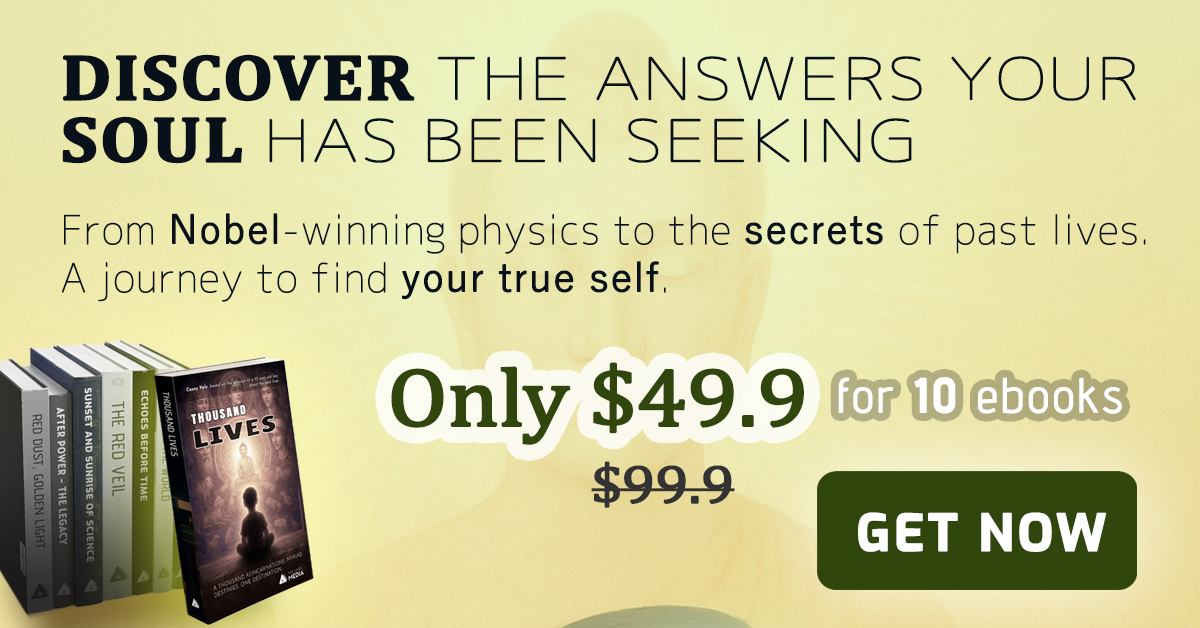
<style>
.page{position:relative;width:1200px;height:628px}
.page>*{position:absolute;margin:0}
.t1{font:57.6px "Chogokuboso-Gothic";letter-spacing:0.005em;color:#08101a;font-weight:bold;scale:1.25 1}
.t2{font:64.8px "Cambria-Bold";letter-spacing:0.005em;color:#08101a;font-weight:bold;scale:1.11 1}
.t3{font:39.6px/48px "Chogokuboso-Gothic";letter-spacing:0.005em;color:#08101a;font-weight:bold}
.t4{font:39.6px/48px "YuGothic-Regular";letter-spacing:0.005em;color:#08101a;font-weight:bold}
.t5{font:82.8px "Cambria";letter-spacing:-0.025em;color:#31460c;font-weight:bold;scale:1.11 1}
.t6{font:54px "Cambria";letter-spacing:-0.025em;color:#31460c;font-weight:bold;scale:1.11 1}
.t7{font:48px "AdventPro-Regular";letter-spacing:0.05em;color:#ffffff;font-weight:bold}
.t8{font:48px "AdventPro-Bold";letter-spacing:0.05em;color:#ffffff;font-weight:bold}
.t9{font:54px "Cambria";letter-spacing:-0.025em;color:#333333;font-weight:bold;scale:1.11 1}
.t10{font:50.3px "Exo-Bold";letter-spacing:0.05em;color:#fefefe;font-weight:bold}
</style>
<div class="page">
<p class="t1" style="left:62px;top:54px;width:1074px;height:110px"><span class="t2">DISCOVER </span>THE ANSWERS YOUR <span class="t2">SOUL </span>HAS BEEN SEEKING</p>
<p class="t3" style="left:61px;top:213px;width:1085px;height:89px">From <span class="t4">Nobel</span>-winning physics to the <span class="t4">secrets </span>of past lives. <br>A journey to find <span class="t4">your true self</span>.</p>
<p class="t5" style="left:391px;top:362px;width:413px;height:83px"><span class="t6"><br></span>Only $49.9</p>
<p class="t7" style="left:838px;top:377px;width:284px;height:37px">for <span class="t8">10</span> ebooks</p>
<p class="t9" style="left:591px;top:461px;width:144px;height:47px">$99.9</p>
<p class="t10" style="left:858px;top:512px;width:249px;height:40px">GET NOW</p>
</div>
